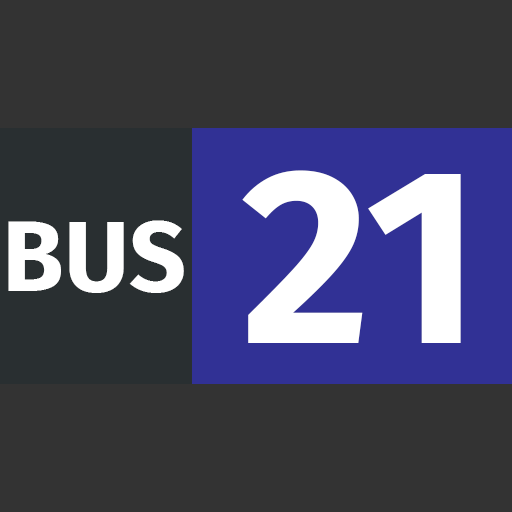
<style>
.page{position:relative;width:512px;height:512px;background:#333333}
.page>*{position:absolute;margin:0}
.t1{font:250px "FiraSans-Bold";color:#ffffff}
.t2{font:100px "FiraSans-Bold";color:#ffffff}
</style>
<div class="page">
<p class="t1" style="left:242px;top:170px;width:219px;height:173px">21</p>
<p class="t2" style="left:8px;top:220px;width:176px;height:73px">BUS</p>
</div>
